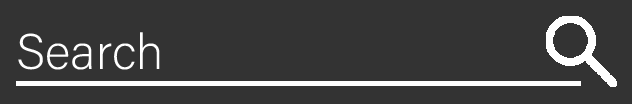
<style>
.page{position:relative;width:632px;height:104px;background:#333333}
.page>*{position:absolute;margin:0}
.t1{font:50px "AcuminConcept-ExtraLight";color:#ffffff}
</style>
<div class="page">
<p class="t1" style="left:18px;top:32px;width:142px;height:38px">Search</p>
</div>
